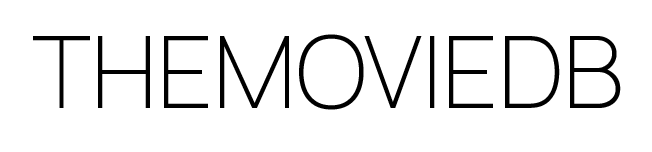
<style>
.page{position:relative;width:652px;height:152px;background:#ffffff}
.page>*{position:absolute;margin:0}
.t1{font:100px "Manrope-ExtraLight";color:#000000}
</style>
<div class="page">
<p class="t1" style="left:33px;top:34px;width:588px;height:76px">THEMOVIEDB</p>
</div>
